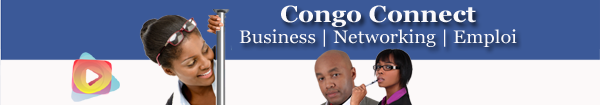
<style>
.page{position:relative;width:600px;height:105px;background:#3b5998}
.page>*{position:absolute;margin:0}
.t1{font:18px "Georgia";color:#faf9fb;scale:1.1 1}
.t2{font:23px "Georgia-Bold";color:#faf9fb;scale:1.1 1}
</style>
<div class="page">
<p class="t1" style="left:239px;top:5px;width:278px;height:42px;text-align:center"><span class="t2">Congo Connect<br></span>Business | Networking | Emploi</p>
</div>
